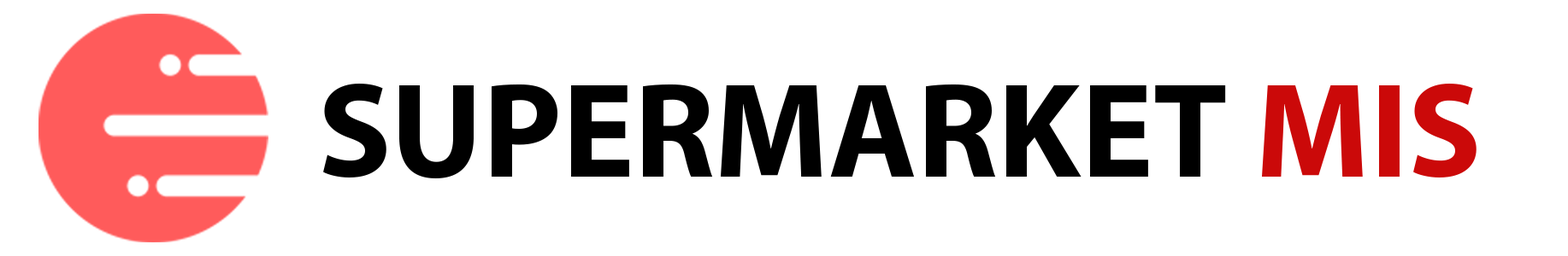
<style>
.page{position:relative;width:1568px;height:256px;background:#ffffff}
.page>*{position:absolute;margin:0}
.t1{font:135.4px "MyriadPro-Bold";color:#000000}
.t2{font:135.4px "MyriadPro-Bold";color:#cb0909}
</style>
<div class="page">
<p class="t1" style="left:323px;top:84px;width:1154px;height:95px">SUPERMARKET <span class="t2">MIS</span></p>
</div>
